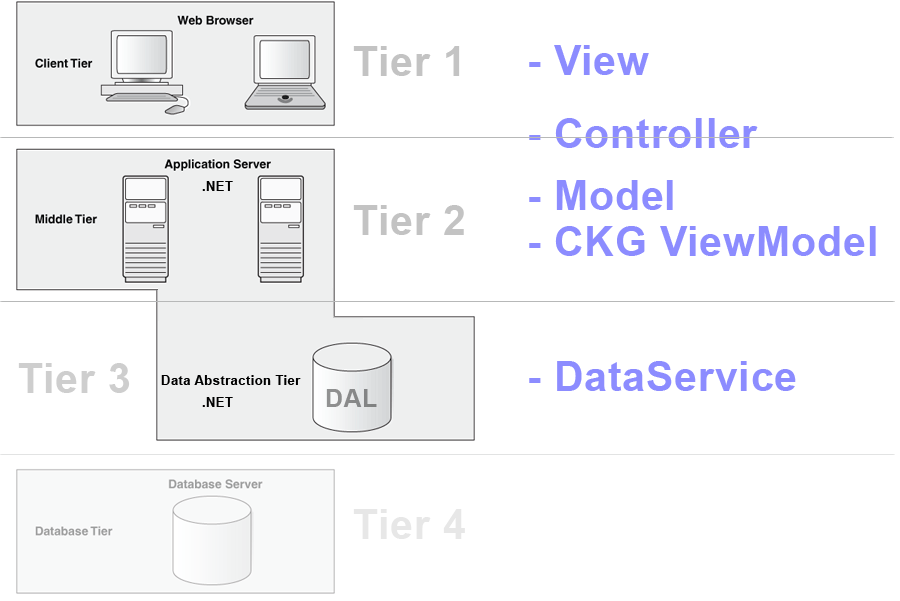
<style>
.page{position:relative;width:900px;height:601px;background:#ffffff}
.page>*{position:absolute;margin:0}
.t1{font:41.1px "Arial-BoldMT";letter-spacing:0.02em;color:#c3c3c3}
.t2{font:41.1px "Arial-BoldMT";letter-spacing:0.02em;color:#8c8cff}
.t3{font:13.3px "Arial-BoldMT";letter-spacing:0.02em;color:#000000}
.t4{font:41.1px "Arial-BoldMT";letter-spacing:0.02em;color:#cecece}
.t5{font:25px "Arial-BoldMT";letter-spacing:0.02em;color:#898a8a}
</style>
<div class="page">
<p class="t1" style="left:353px;top:46px;width:107px;height:30px">Tier 1</p>
<p class="t2" style="left:529px;top:45px;width:120px;height:30px">- View</p>
<p class="t2" style="left:529px;top:118px;width:229px;height:30px">- Controller</p>
<p class="t3" style="left:202px;top:181px;width:31px;height:10px">.NET</p>
<p class="t2" style="left:529px;top:180px;width:144px;height:30px">- Model</p>
<p class="t1" style="left:353px;top:205px;width:111px;height:30px">Tier 2</p>
<p class="t2" style="left:529px;top:226px;width:347px;height:30px">- CKG ViewModel</p>
<p class="t4" style="left:18px;top:363px;width:112px;height:30px">Tier 3</p>
<p class="t2" style="left:529px;top:361px;width:267px;height:30px">- DataService</p>
<p class="t3" style="left:161px;top:375px;width:140px;height:10px">Data Abstraction Tier</p>
<p class="t5" style="left:326px;top:389px;width:51px;height:18px">DAL</p>
<p class="t3" style="left:202px;top:397px;width:31px;height:10px">.NET</p>
</div>
